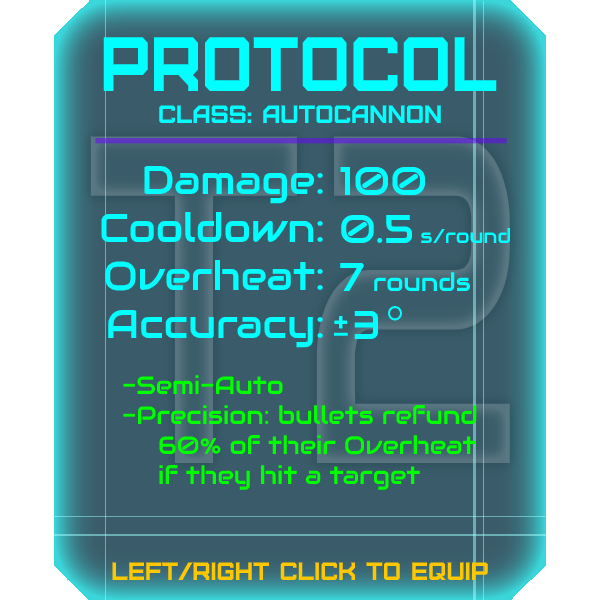
<style>
.page{position:relative;width:600px;height:600px;background:#3a5c6a}
.page>*{position:absolute;margin:0}
.t1{font:76.8px "Furore";color:#00ffff;scale:0.91 1}
.t2{font:25px "Furore";color:#00ffff}
.t3{font:40px "Audiowide-Regular";color:#00ffff}
.t4{font:20px "Audiowide-Regular";color:#00ffff}
.t5{font:25px "Audiowide-Regular";color:#00ffff}
.t6{font:25px "Audiowide-Regular";color:#00ff00}
.t7{font:25px "Furore";color:#ffc700}
</style>
<div class="page">
<p class="t1" style="left:103px;top:37px;width:394px;height:54px">protocol</p>
<p class="t2" style="left:159px;top:105px;width:282px;height:18px">Class: autocannon</p>
<p class="t3" style="left:101px;top:165px;width:222px;height:183px;text-align:right">Damage:<br>Cooldown:<br>Overheat:<br>Accuracy:</p>
<p class="t3" style="left:340px;top:166px;width:171px;height:173px">100<br>0.5 <span class="t4">s/round<br></span>7 <span class="t5">rounds<br> </span>3</p>
<p class="t6" style="left:123px;top:375px;width:354px;height:115px"><span class="t3"><br><br><br><br><br></span>-Semi-Auto<br>-Precision: bullets refund<br> 60% of their Overheat<br> if they hit a target</p>
<p class="t7" style="left:112px;top:562px;width:376px;height:18px">left/right click to equip</p>
</div>
